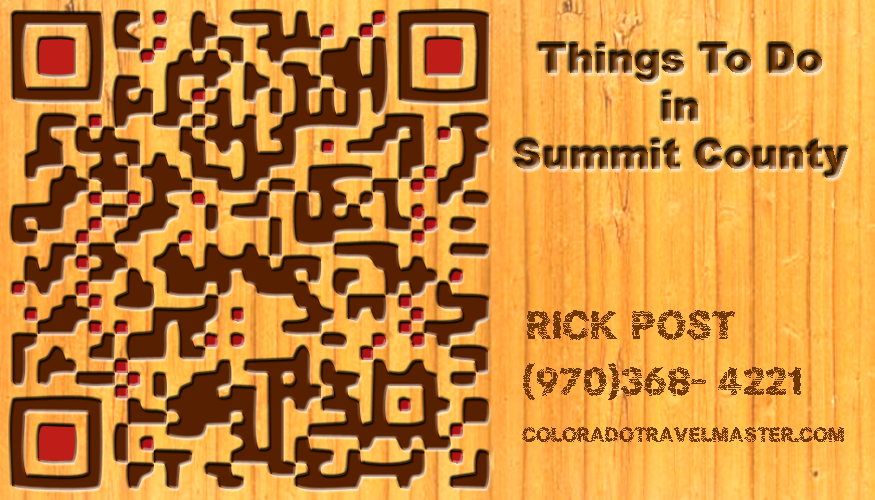
<style>
.page{position:relative;width:875px;height:500px}
.page>*{position:absolute;margin:0}
.t1{font:40px "Arial-Black"}
.t2{font:36px "BARK";color:#6e3705}
.t3{font:18px "BARK";color:#6e3705}
</style>
<div class="page">
<p class="t1" style="left:515px;top:44px;width:333px;height:134px;text-align:center">Things To Do<br>in<br>Summit County</p>
<p class="t2" style="left:527px;top:310px;width:208px;height:30px">Rick Post</p>
<p class="t2" style="left:523px;top:363px;width:278px;height:37px">(970)368- 4221</p>
<p class="t3" style="left:522px;top:427px;width:322px;height:15px">coloradotravelmaster.com</p>
</div>
